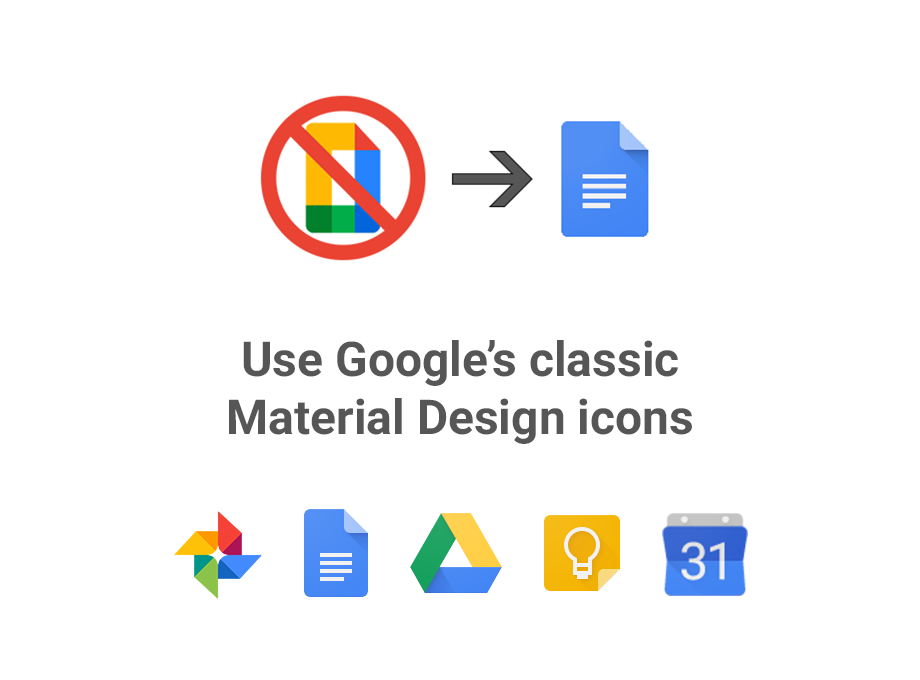
<style>
.page{position:relative;width:920px;height:680px;background:#ffffff}
.page>*{position:absolute;margin:0}
.t1{font:48px "Roboto-Bold";color:#565656}
</style>
<div class="page">
<p class="t1" style="left:229px;top:340px;width:463px;height:104px;text-align:center">Use Google’s classic<br>Material Design icons</p>
</div>
